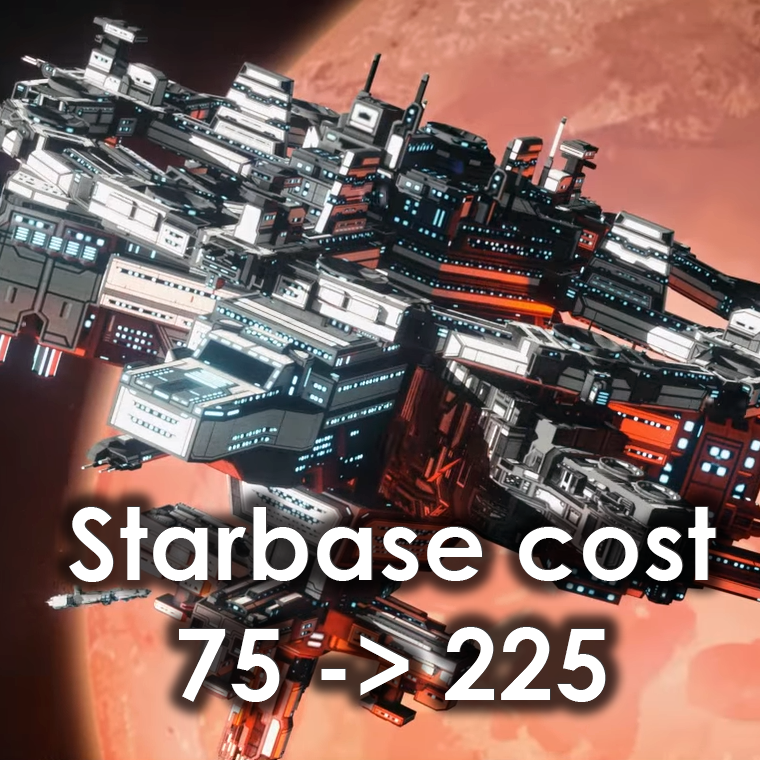
<style>
.page{position:relative;width:760px;height:760px}
.page>*{position:absolute;margin:0}
.t1{font:100px "CenturyGothic-Bold";color:#ffffff}
</style>
<div class="page">
<p class="t1" style="left:69px;top:506px;width:648px;height:196px;text-align:center">Starbase cost 75 -&gt; 225</p>
</div>
